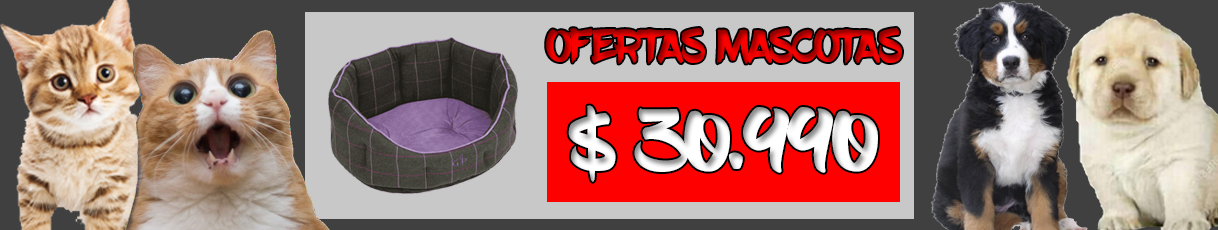
<style>
.page{position:relative;width:1218px;height:230px}
.page>*{position:absolute;margin:0}
.t1{font:47.1px "BlowBrush"}
.t2{font:84.2px "BlowBrush";color:#ffffff}
</style>
<div class="page">
<p class="t1" style="left:546px;top:28px;width:356px;height:36px">OFERTAS MASCOTAS</p>
<p class="t2" style="left:568px;top:105px;width:310px;height:77px">$ 30.990</p>
</div>
